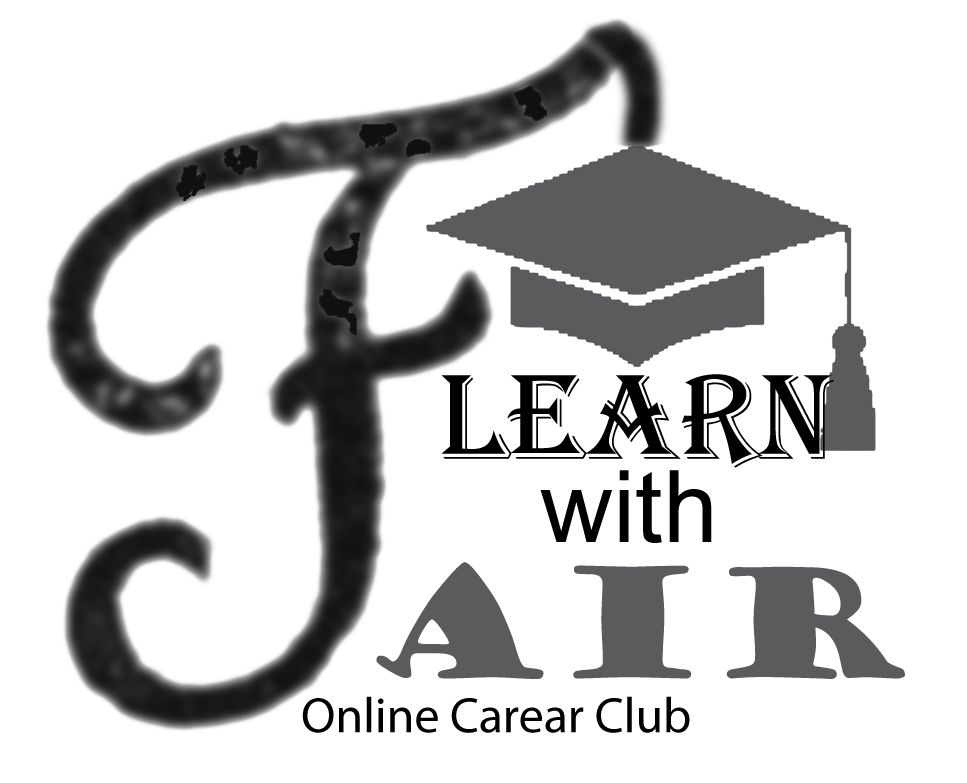
<style>
.page{position:relative;width:967px;height:783px;background:#ffffff}
.page>*{position:absolute;margin:0}
.t1{font:125px "Algerian";color:#000000}
.t2{font:100px "ArialMT";color:#000000}
.t3{font:150px "GoudyStout";color:#5b5b5d}
.t4{font:50px "MyriadPro-Regular";color:#000000}
</style>
<div class="page">
<p class="t1" style="left:441px;top:374px;width:393px;height:94px">LEARN</p>
<p class="t2" style="left:540px;top:470px;width:172px;height:73px">with</p>
<p class="t3" style="left:376px;top:562px;width:529px;height:117px">air</p>
<p class="t4" style="left:302px;top:696px;width:388px;height:37px">Online Carear Club</p>
</div>
